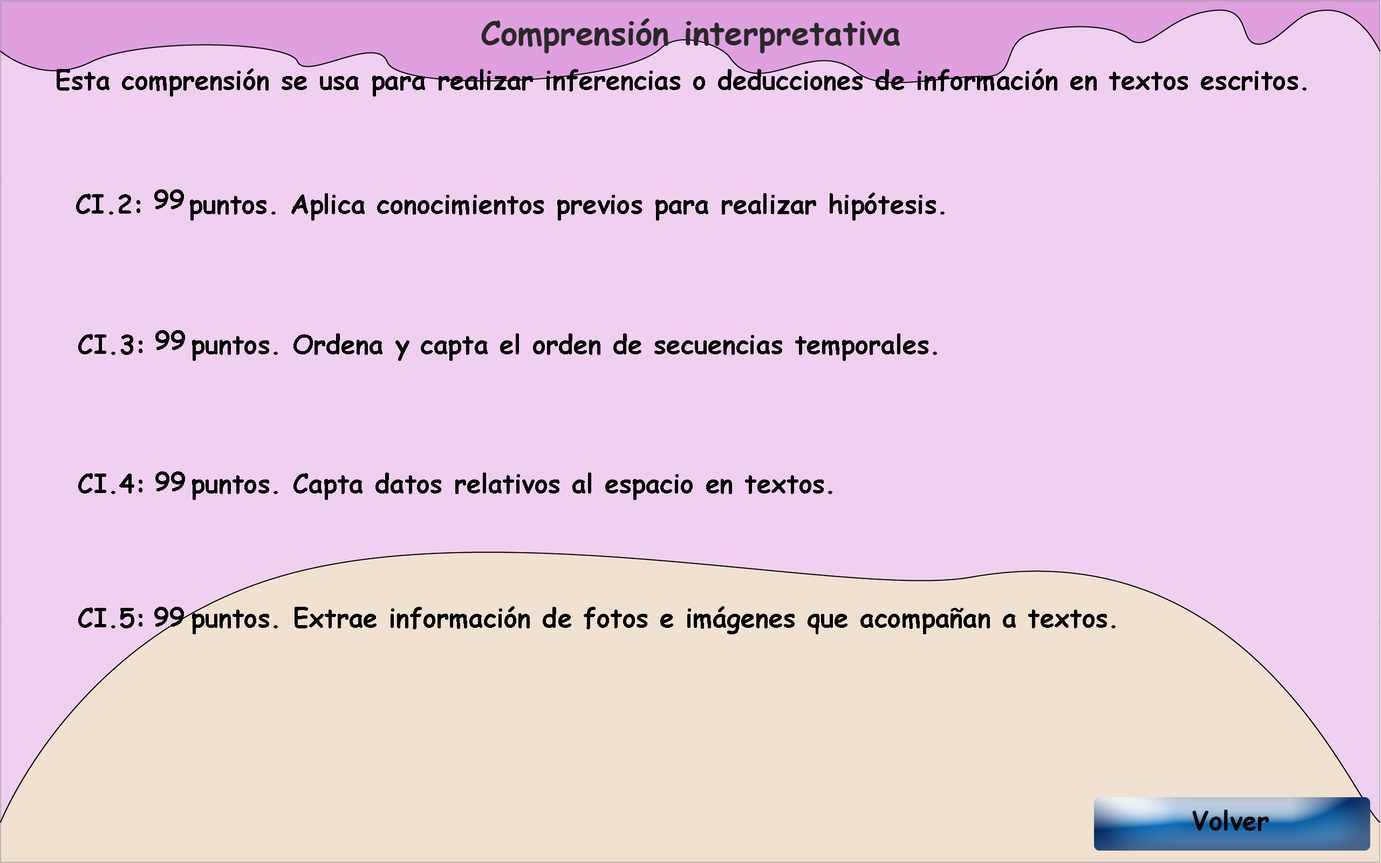
<style>
.page{position:relative;width:1381px;height:863px;background:#efd0f0}
.page>*{position:absolute;margin:0}
.t1{font:32.4px "ComicSansMS-Bold";color:#282828}
.t2{font:25.9px "ComicSansMS-Bold";color:#000000}
</style>
<div class="page">
<p class="t1" style="left:481px;top:18px;width:420px;height:35px">Comprensión interpretativa</p>
<p class="t2" style="left:57px;top:69px;width:1250px;height:28px">Esta comprensión se usa para realizar inferencias o deducciones de información en textos escritos.</p>
<p class="t2" style="left:76px;top:193px;width:869px;height:28px">CI.2:    puntos. Aplica conocimientos previos para realizar hipótesis.</p>
<p class="t2" style="left:154px;top:189px;width:30px;height:20px">99</p>
<p class="t2" style="left:78px;top:333px;width:859px;height:28px">CI.3:    puntos. Ordena y capta el orden de secuencias temporales.</p>
<p class="t2" style="left:155px;top:330px;width:30px;height:20px">99</p>
<p class="t2" style="left:78px;top:473px;width:755px;height:27px">CI.4:    puntos. Capta datos relativos al espacio en textos.</p>
<p class="t2" style="left:155px;top:472px;width:30px;height:20px">99</p>
<p class="t2" style="left:78px;top:606px;width:1038px;height:29px">CI.5:    puntos. Extrae información de fotos e imágenes que acompañan a textos.</p>
<p class="t2" style="left:154px;top:607px;width:30px;height:20px">99</p>
<p class="t2" style="left:1192px;top:810px;width:78px;height:21px">Volver</p>
</div>
